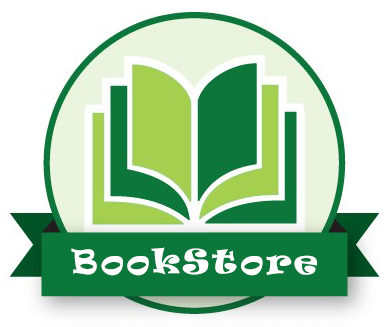
<style>
.page{position:relative;width:392px;height:327px;background:#ffffff}
.page>*{position:absolute;margin:0}
.t1{font:32px "Ravie";letter-spacing:0.1em;color:#ffffff}
</style>
<div class="page">
<p class="t1" style="left:71px;top:247px;width:246px;height:29px">BookStore</p>
</div>
